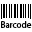
<style>
.page{position:relative;width:32px;height:32px;background:#ffffff}
.page>*{position:absolute;margin:0}
.t1{font:9px "MyriadPro-Regular";color:#000000}
</style>
<div class="page">
<p class="t1" style="left:1px;top:21px;width:31px;height:7px">Barcode</p>
</div>
